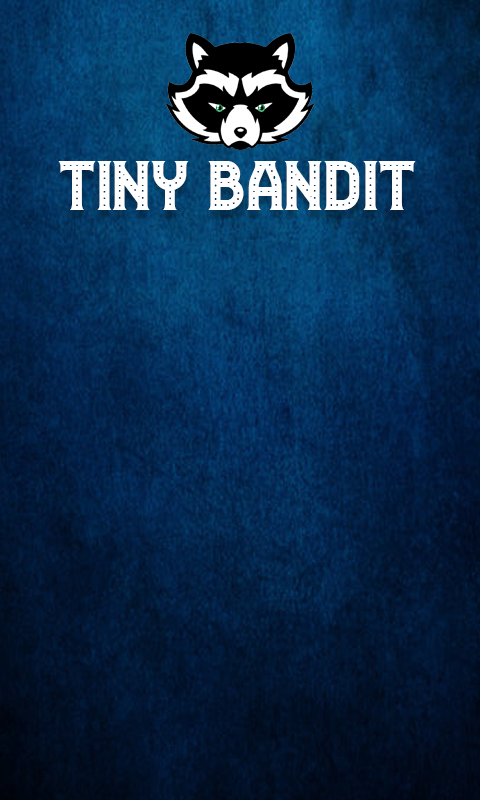
<style>
.page{position:relative;width:480px;height:800px}
.page>*{position:absolute;margin:0}
.t1{font:72px "Casino-Regular";color:#ffffff}
</style>
<div class="page">
<p class="t1" style="left:58px;top:161px;width:358px;height:49px">Tiny Bandit</p>
</div>
